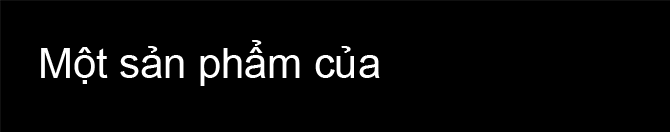
<style>
.page{position:relative;width:670px;height:132px;background:#000000}
.page>*{position:absolute;margin:0}
.t1{font:41.7px "ArialMT";color:#ffffff}
</style>
<div class="page">
<p class="t1" style="left:41px;top:40px;width:339px;height:46px">Một sản phẩm của</p>
</div>
